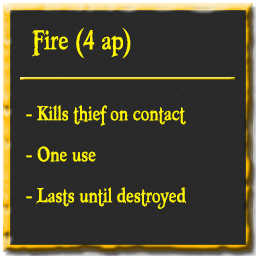
<style>
.page{position:relative;width:256px;height:256px;background:#292929}
.page>*{position:absolute;margin:0}
.t1{font:40px "Booter-ZeroZero";color:#fff600}
.t2{font:30px "Booter-ZeroZero";color:#fff600}
</style>
<div class="page">
<p class="t1" style="left:32px;top:27px;width:99px;height:32px">Fire (4 ap)</p>
<p class="t2" style="left:26px;top:105px;width:160px;height:21px">- Kills thief on contact</p>
<p class="t2" style="left:26px;top:146px;width:70px;height:16px">- One use</p>
<p class="t2" style="left:26px;top:187px;width:160px;height:22px">- Lasts until destroyed</p>
</div>
